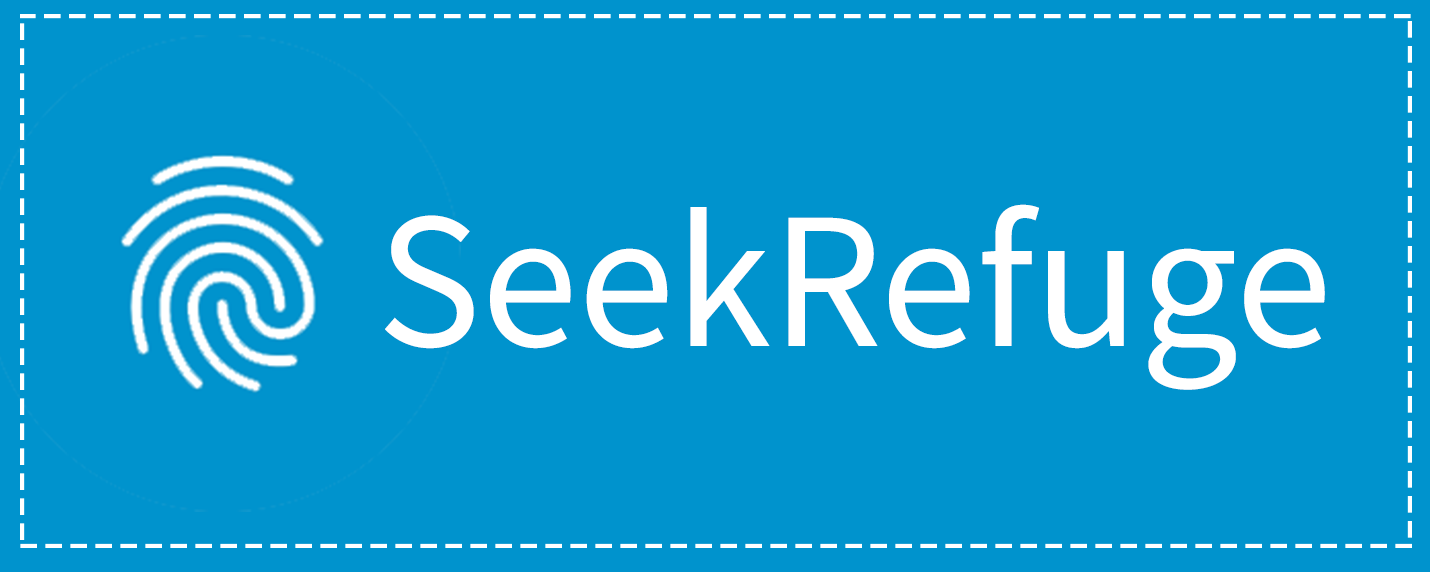
<style>
.page{position:relative;width:1430px;height:572px;background:#0093cd}
.page>*{position:absolute;margin:0}
.t1{font:195px "SourceSansPro-Regular";color:#ffffff}
</style>
<div class="page">
<p class="t1" style="left:385px;top:204px;width:940px;height:186px">SeekRefuge</p>
</div>
